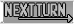
<style>
.page{position:relative;width:74px;height:24px}
.page>*{position:absolute;margin:0}
.t1{font:14.3px "PressStartReg";color:#bfbfbf;scale:0.53 1}
</style>
<div class="page">
<p class="t1" style="left:4px;top:3px;width:62px;height:14px">NEXTTURN</p>
</div>
